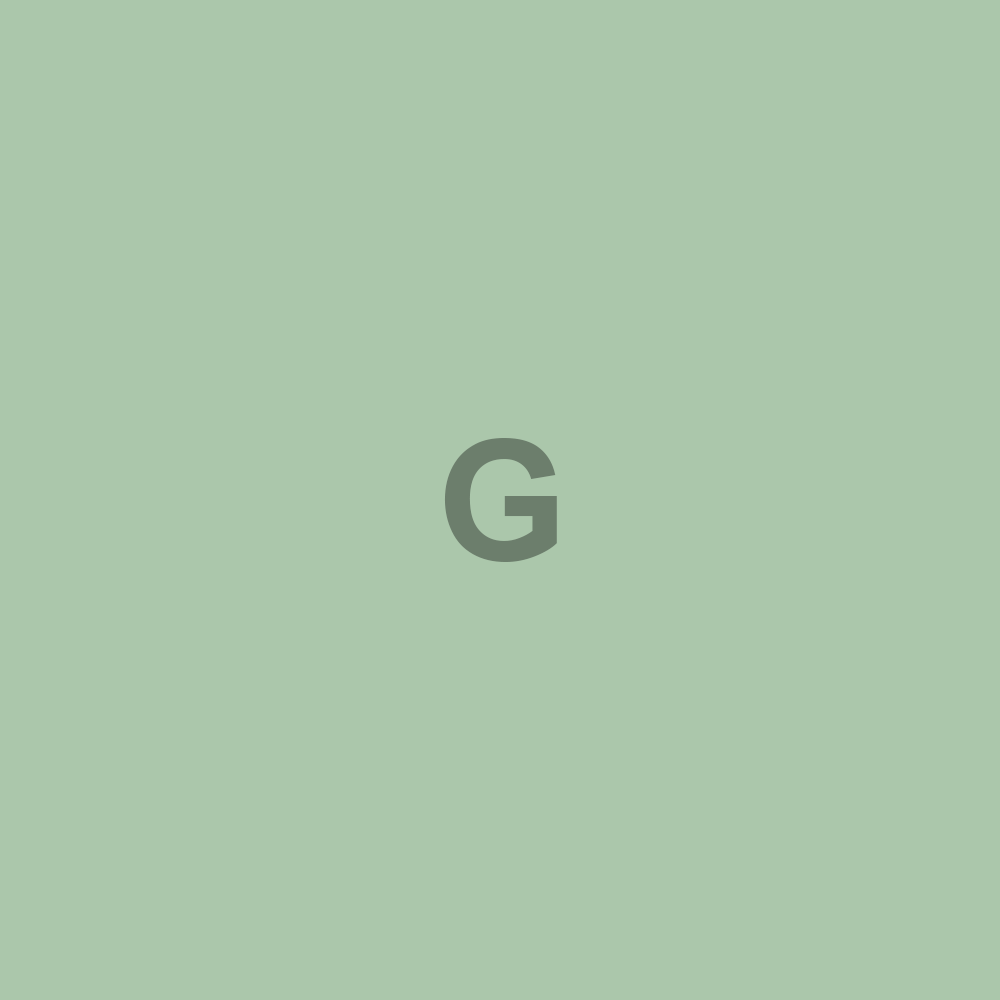
<style>
.page{position:relative;width:1000px;height:1000px;background:#abc7ab}
.page>*{position:absolute;margin:0}
.t1{font:166.7px "Arial-BoldMT";color:#6c7e6c}
</style>
<div class="page">
<p class="t1" style="left:444px;top:438px;width:113px;height:124px">G</p>
</div>
